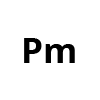
<style>
.page{position:relative;width:100px;height:100px;background:#ffffff}
.page>*{position:absolute;margin:0}
.t1{font:35px "OpenSans-Bold";color:#000000}
</style>
<div class="page">
<p class="t1" style="left:24px;top:38px;width:51px;height:25px">Pm</p>
</div>
